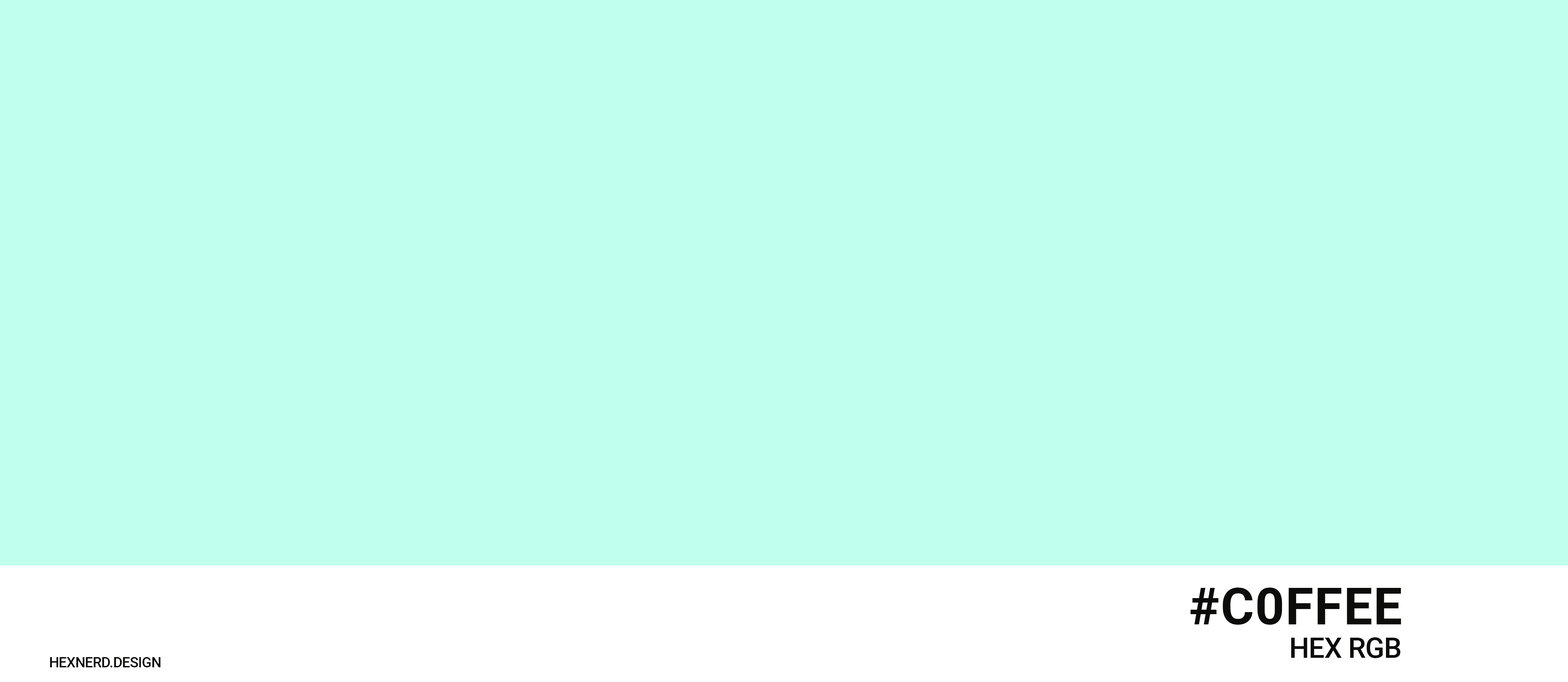
<style>
.page{position:relative;width:1568px;height:682px;background:#c0ffee}
.page>*{position:absolute;margin:0}
.t1{font:51.1px "Roboto-Bold";letter-spacing:0.02em;color:#0c0c0b}
.t2{font:28.4px "Roboto-Medium";letter-spacing:-0.02em;color:#0c0c0b}
.t3{font:14.2px "Roboto-Medium";letter-spacing:-0.02em;color:#0c0c0b}
</style>
<div class="page">
<p class="t1" style="left:1190px;top:587px;width:211px;height:37px">#C0FFEE</p>
<p class="t2" style="left:1291px;top:637px;width:110px;height:21px">HEX RGB</p>
<p class="t3" style="left:50px;top:657px;width:111px;height:10px">HEXNERD.DESIGN</p>
</div>
